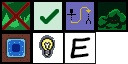
<style>
.page{position:relative;width:128px;height:64px;background:#ffffff}
.page>*{position:absolute;margin:0}
.t1{font:28.3px "SegoeScript-Bold";color:#000000}
</style>
<div class="page">
<p class="t1" style="left:70px;top:37px;width:21px;height:22px">E</p>
</div>
